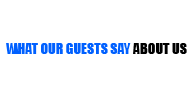
<style>
.page{position:relative;width:194px;height:95px;background:#ffffff}
.page>*{position:absolute;margin:0}
.t1{font:14px "Impact";color:#0060ff}
.t2{font:14px "Impact";color:#000000}
</style>
<div class="page">
<p class="t1" style="left:6px;top:43px;width:181px;height:11px">WHAT OUR GUESTS SAY <span class="t2">ABOUT US</span></p>
</div>
